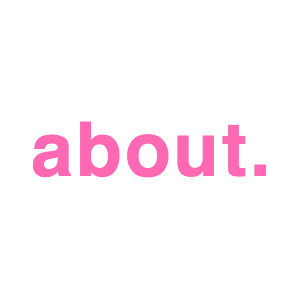
<style>
.page{position:relative;width:300px;height:300px;background:#ffffff}
.page>*{position:absolute;margin:0}
.t1{font:75px "Helvetica-Bold";letter-spacing:0.04em;color:#ff69b4}
</style>
<div class="page">
<p class="t1" style="left:32px;top:121px;width:235px;height:57px">about.</p>
</div>
